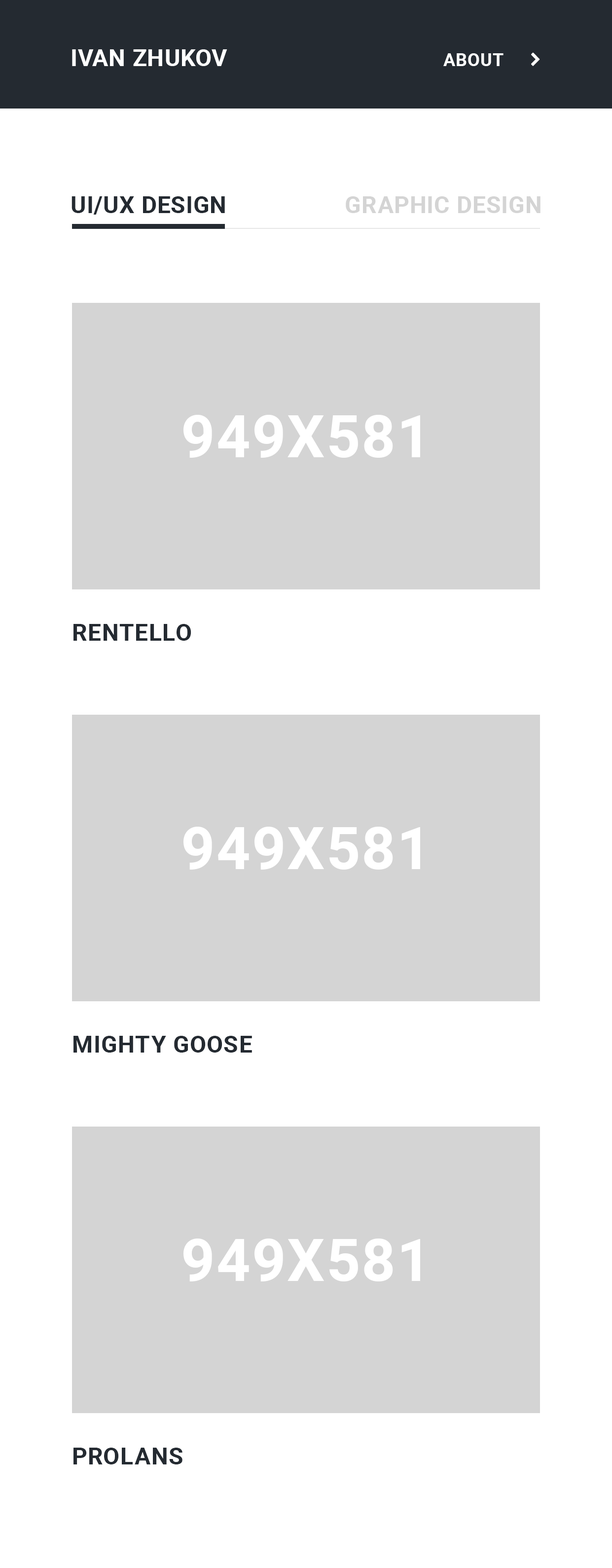
<style>
.page{position:relative;width:612px;height:1568px;background:#ffffff}
.page>*{position:absolute;margin:0}
.t1{font:23.7px "Roboto-Bold";letter-spacing:0.025em;color:#ffffff}
.t2{font:17.8px "Roboto-Bold";letter-spacing:0.025em;color:#ffffff}
.t3{font:23.7px "Roboto-Bold";letter-spacing:0.025em;color:#242a31;text-transform:uppercase}
.t4{font:23.7px "Roboto-Bold";letter-spacing:0.025em;color:#d4d4d4;text-transform:uppercase}
</style>
<div class="page">
<p class="t1" style="left:72px;top:49px;width:155px;height:17px">IVAN ZHUKOV</p>
<p class="t2" style="left:443px;top:53px;width:61px;height:13px">ABOUT</p>
<p class="t3" style="left:72px;top:196px;width:153px;height:19px">UI/UX DESIGN</p>
<p class="t4" style="left:346px;top:196px;width:195px;height:17px">graphic DESIGN</p>
<p class="t3" style="left:73px;top:624px;width:118px;height:17px">rentello</p>
<p class="t3" style="left:73px;top:1036px;width:179px;height:17px">MIGHTY GOOSE</p>
<p class="t3" style="left:73px;top:1448px;width:109px;height:16px">PROLANS</p>
</div>
